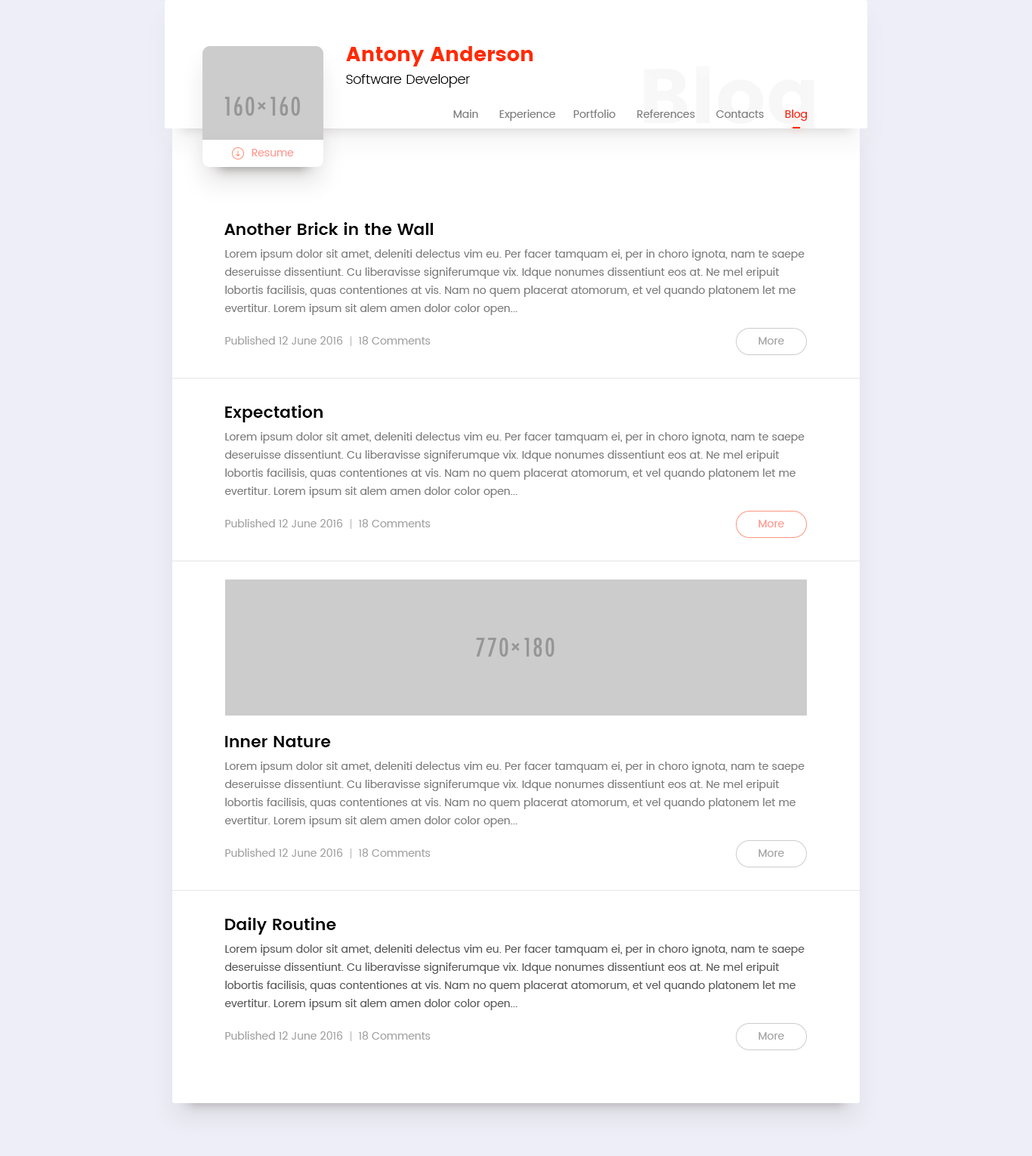
<style>
.page{position:relative;width:1032px;height:1156px;background:#ffffff}
.page>*{position:absolute;margin:0}
.t1{font:20.4px "Poppins";color:#ff2a00}
.t2{font:13.6px "Poppins-Light";color:#000000}
.t3{font:10.6px "Poppins-Regular";color:#7d7d7d}
.t4{font:10.6px "Poppins-Regular";color:#ff1800}
.t5{font:10.6px "Poppins-Regular";color:#ff978d}
.t6{font:16.6px "Poppins-SemiBold";color:#000000}
.t7{font:10.6px/18.1px "Poppins-Regular";color:#7d7d7d}
.t8{font:10.6px "Poppins-Regular";color:#a3a3a3}
.t9{font:10.6px/18.1px "Poppins-Regular";color:#585858}
</style>
<div class="page">
<p class="t1" style="left:346px;top:46px;width:187px;height:20px">Antony Anderson</p>
<p class="t2" style="left:346px;top:74px;width:124px;height:14px">Software Developer</p>
<p class="t3" style="left:453px;top:110px;width:25px;height:8px">Main</p>
<p class="t3" style="left:499px;top:110px;width:56px;height:11px">Experience</p>
<p class="t3" style="left:573px;top:110px;width:43px;height:8px">Portfolio</p>
<p class="t3" style="left:637px;top:110px;width:58px;height:8px">References</p>
<p class="t3" style="left:716px;top:110px;width:48px;height:8px">Contacts</p>
<p class="t4" style="left:785px;top:110px;width:22px;height:11px">Blog</p>
<p class="t5" style="left:252px;top:149px;width:42px;height:7px">Resume</p>
<p class="t6" style="left:224px;top:222px;width:209px;height:13px">Another Brick in the Wall</p>
<p class="t7" style="left:224px;top:249px;width:580px;height:66px">Lorem ipsum dolor sit amet, deleniti delectus vim eu. Per facer tamquam ei, per in choro ignota, nam te saepe deseruisse dissentiunt. Cu liberavisse signiferumque vix. Idque nonumes dissentiunt eos at. Ne mel eripuit lobortis facilisis, quas contentiones at vis. Nam no quem placerat atomorum, et vel quando platonem let me evertitur. Lorem ipsum sit alem amen dolor color open...</p>
<p class="t8" style="left:225px;top:336px;width:118px;height:8px">Published 12 June 2016</p>
<p class="t8" style="left:359px;top:336px;width:72px;height:8px">18 Comments</p>
<p class="t8" style="left:758px;top:337px;width:26px;height:7px">More</p>
<p class="t6" style="left:225px;top:405px;width:98px;height:17px">Expectation</p>
<p class="t7" style="left:224px;top:432px;width:580px;height:66px">Lorem ipsum dolor sit amet, deleniti delectus vim eu. Per facer tamquam ei, per in choro ignota, nam te saepe deseruisse dissentiunt. Cu liberavisse signiferumque vix. Idque nonumes dissentiunt eos at. Ne mel eripuit lobortis facilisis, quas contentiones at vis. Nam no quem placerat atomorum, et vel quando platonem let me evertitur. Lorem ipsum sit alem amen dolor color open...</p>
<p class="t8" style="left:225px;top:519px;width:118px;height:8px">Published 12 June 2016</p>
<p class="t8" style="left:359px;top:519px;width:72px;height:8px">18 Comments</p>
<p class="t5" style="left:758px;top:520px;width:26px;height:7px">More</p>
<p class="t6" style="left:225px;top:736px;width:106px;height:11px">Inner Nature</p>
<p class="t7" style="left:224px;top:761px;width:580px;height:66px">Lorem ipsum dolor sit amet, deleniti delectus vim eu. Per facer tamquam ei, per in choro ignota, nam te saepe deseruisse dissentiunt. Cu liberavisse signiferumque vix. Idque nonumes dissentiunt eos at. Ne mel eripuit lobortis facilisis, quas contentiones at vis. Nam no quem placerat atomorum, et vel quando platonem let me evertitur. Lorem ipsum sit alem amen dolor color open...</p>
<p class="t8" style="left:225px;top:848px;width:118px;height:9px">Published 12 June 2016</p>
<p class="t8" style="left:359px;top:848px;width:72px;height:9px">18 Comments</p>
<p class="t8" style="left:758px;top:849px;width:26px;height:8px">More</p>
<p class="t6" style="left:225px;top:917px;width:111px;height:17px">Daily Routine</p>
<p class="t9" style="left:224px;top:944px;width:580px;height:66px">Lorem ipsum dolor sit amet, deleniti delectus vim eu. Per facer tamquam ei, per in choro ignota, nam te saepe deseruisse dissentiunt. Cu liberavisse signiferumque vix. Idque nonumes dissentiunt eos at. Ne mel eripuit lobortis facilisis, quas contentiones at vis. Nam no quem placerat atomorum, et vel quando platonem let me evertitur. Lorem ipsum sit alem amen dolor color open...</p>
<p class="t8" style="left:225px;top:1031px;width:118px;height:8px">Published 12 June 2016</p>
<p class="t8" style="left:359px;top:1031px;width:72px;height:8px">18 Comments</p>
<p class="t8" style="left:758px;top:1032px;width:26px;height:7px">More</p>
</div>
